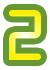
<style>
.page{position:relative;width:50px;height:70px;background:#669933}
.page>*{position:absolute;margin:0}
.t1{font:64px "OCRAStd"}
</style>
<div class="page">
<p class="t1" style="left:9px;top:10px;width:32px;height:50px">2</p>
</div>
